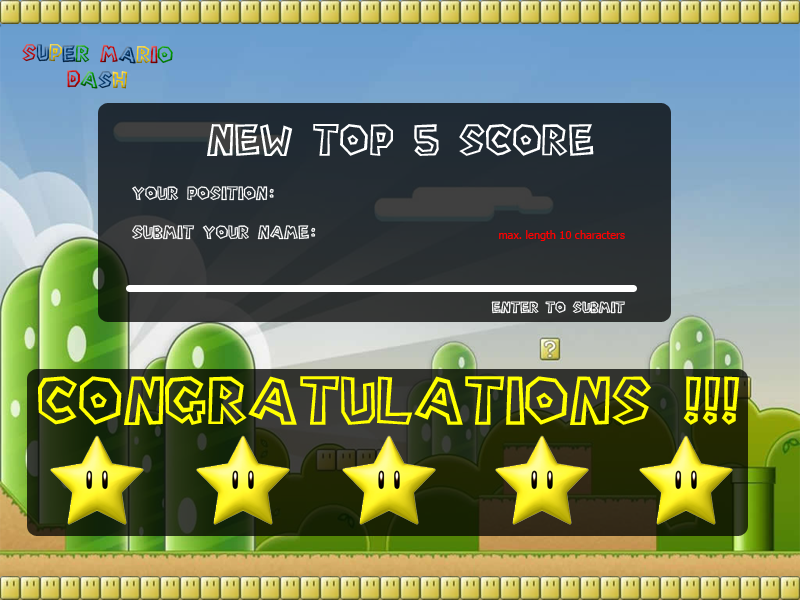
<style>
.page{position:relative;width:800px;height:600px}
.page>*{position:absolute;margin:0}
.t1{font:21.4px "Super-Mario-Bros.-Regular"}
.t2{font:40.1px "Super-Mario-Bros.-Regular";color:#ffffff}
.t3{font:17px "Super-Mario-Bros.-Regular";color:#ffffff}
.t4{font:11px "Tahoma";color:#ff0000}
.t5{font:14.2px "Super-Mario-Bros.-Regular";color:#ffffff}
.t6{font:61.1px "Super-Mario-Bros.-Regular";color:#ffff00}
</style>
<div class="page">
<p class="t1" style="left:22px;top:43px;width:151px;height:46px;text-align:center;rotate:1deg">SUPER MARIO<br>DASH</p>
<p class="t2" style="left:207px;top:124px;width:387px;height:32px">NEW TOP 5 SCORE</p>
<p class="t3" style="left:132px;top:186px;width:142px;height:15px">Your Position:</p>
<p class="t4" style="left:132px;top:225px;width:493px;height:16px"><span class="t3">Submit your name:                      </span>max. length 10 characters</p>
<p class="t5" style="left:491px;top:301px;width:134px;height:13px">enter to submit</p>
<p class="t6" style="left:38px;top:376px;width:702px;height:49px">CONGRATULATIONS !!!</p>
</div>
